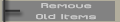
<style>
.page{position:relative;width:120px;height:22px;background:#828282}
.page>*{position:absolute;margin:0}
.t1{font:9px "Axaxaxregular";letter-spacing:0.01em;color:#cbcbcb;scale:1.5 1}
</style>
<div class="page">
<p class="t1" style="left:36px;top:3px;width:60px;height:17px;text-align:center">Remove<br>Old Items</p>
</div>
